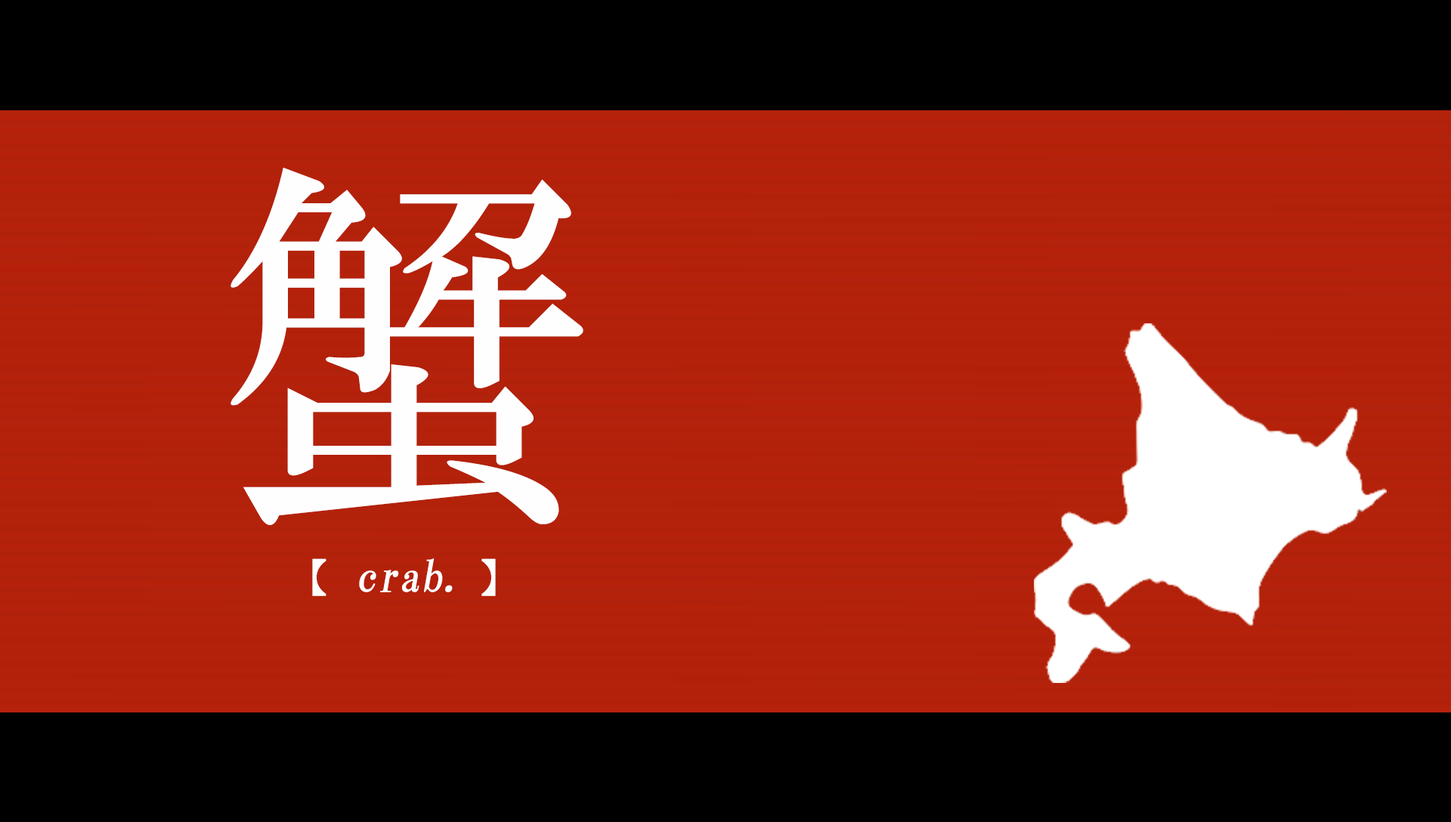
<style>
.page{position:relative;width:1451px;height:822px;background:#000000}
.page>*{position:absolute;margin:0}
.t1{font:378.5px "HGMinchoB";letter-spacing:0.12em;color:#fffeff}
.t2{font:43.8px "HGMinchoB";color:#fffeff;font-style:italic}
.t3{font:41.6px "HGMinchoB";letter-spacing:0.12em;color:#fffeff}
</style>
<div class="page">
<p class="t1" style="left:230px;top:168px;width:353px;height:357px">蟹</p>
<p class="t2" style="left:312px;top:558px;width:184px;height:38px"><span class="t3">【 </span>crab. <span class="t3">】</span></p>
</div>
